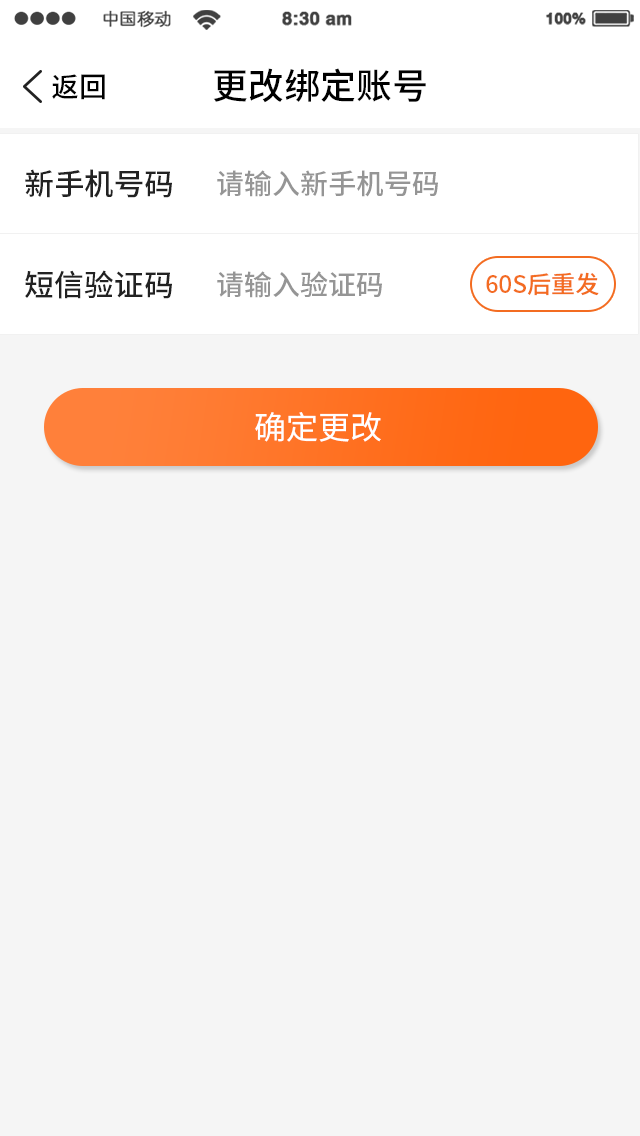
<style>
.page{position:relative;width:640px;height:1136px;background:#f5f5f5}
.page>*{position:absolute;margin:0}
.t1{font:28px "NotoSansHans-Medium";color:#000000}
.t2{font:36px "NotoSansHans-Medium";color:#000000}
.t3{font:30px "NotoSansHans-Medium";color:#222222}
.t4{font:28px "NotoSansHans-Medium";color:#959595}
.t5{font:24px "NotoSansHans-Medium";color:#f36c21}
.t6{font:32px "NotoSansHans-Regular";color:#ffffff}
</style>
<div class="page">
<p class="t1" style="left:52px;top:74px;width:53px;height:26px">返回</p>
<p class="t2" style="left:213px;top:68px;width:213px;height:35px">更改绑定账号</p>
<p class="t3" style="left:25px;top:169px;width:147px;height:29px">新手机号码</p>
<p class="t4" style="left:217px;top:170px;width:221px;height:27px">请输入新手机号码</p>
<p class="t3" style="left:25px;top:270px;width:147px;height:29px">短信验证码</p>
<p class="t4" style="left:217px;top:271px;width:165px;height:27px">请输入验证码</p>
<p class="t5" style="left:486px;top:272px;width:113px;height:24px">60S后重发</p>
<p class="t6" style="left:255px;top:412px;width:126px;height:30px">确定更改</p>
</div>
